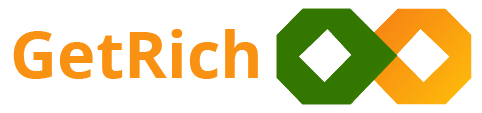
<style>
.page{position:relative;width:482px;height:113px;background:#ffffff}
.page>*{position:absolute;margin:0}
.t1{font:65px "OpenSans-Bold";color:#f99212}
</style>
<div class="page">
<p class="t1" style="left:13px;top:29px;width:245px;height:50px">GetRich</p>
</div>
